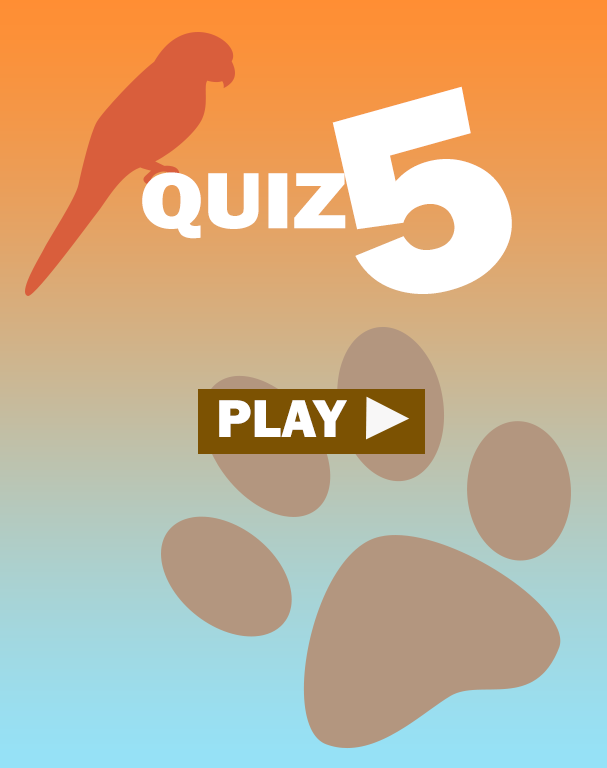
<style>
.page{position:relative;width:607px;height:768px}
.page>*{position:absolute;margin:0}
.t1{font:284.9px "FranklinGothic-Heavy";color:#ffffff;scale:1.05 1}
.t2{font:82.4px "FranklinGothic-Heavy";color:#ffffff;scale:1.12 1}
.t3{font:55.3px "FranklinGothic-Heavy";color:#ffffff}
</style>
<div class="page">
<p class="t1" style="left:332px;top:86px;width:180px;height:208px;rotate:-16deg">5</p>
<p class="t2" style="left:142px;top:172px;width:204px;height:67px">QUIZ</p>
<p class="t3" style="left:219px;top:400px;width:128px;height:37px">PLAY</p>
</div>
